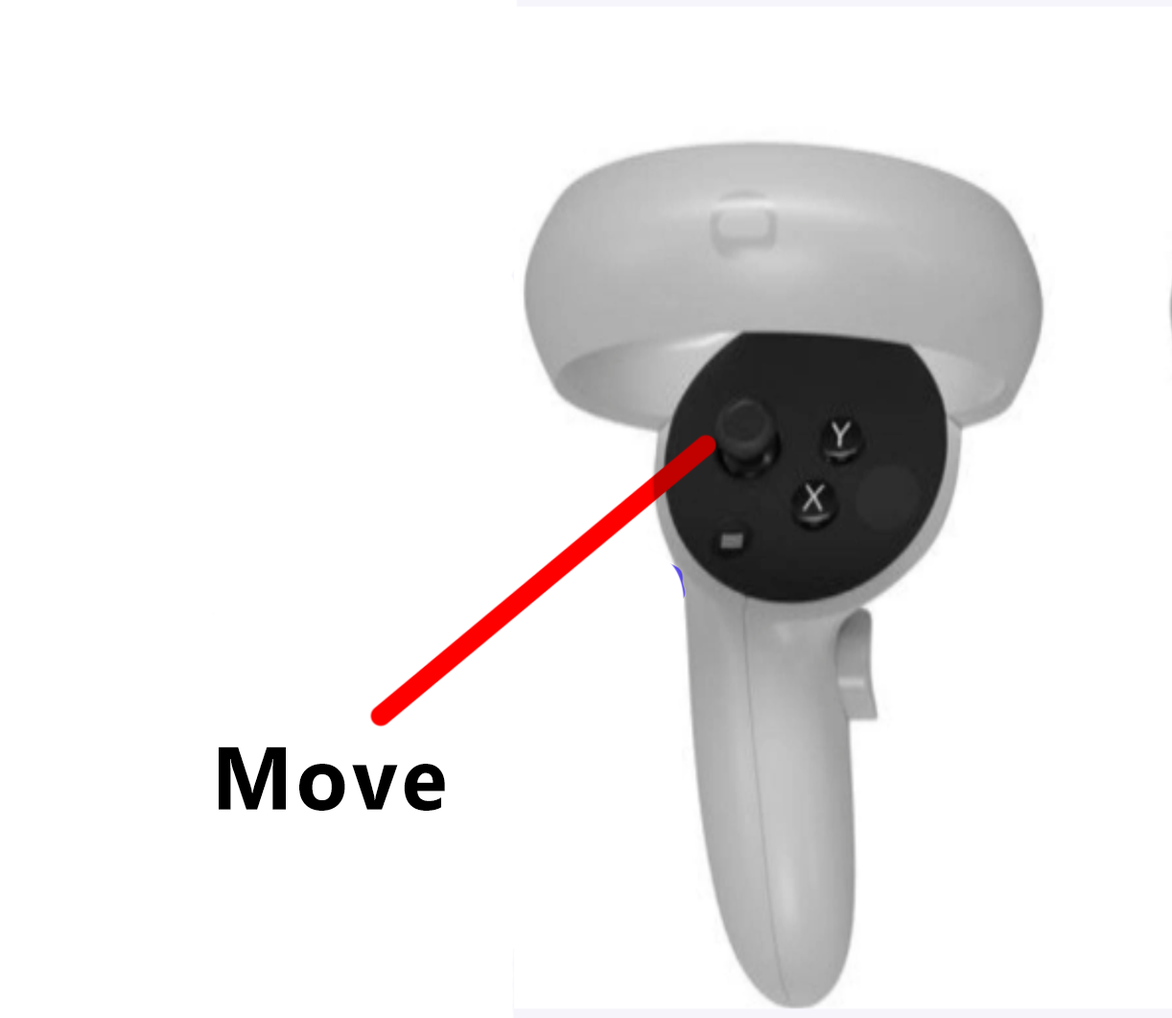
<style>
.page{position:relative;width:1172px;height:1018px;background:#ffffff}
.page>*{position:absolute;margin:0}
.t1{font:89px "Gadugi-Bold";letter-spacing:0.05em;color:#000000;scale:0.94 1}
</style>
<div class="page">
<p class="t1" style="left:219px;top:746px;width:226px;height:64px">Move</p>
</div>
